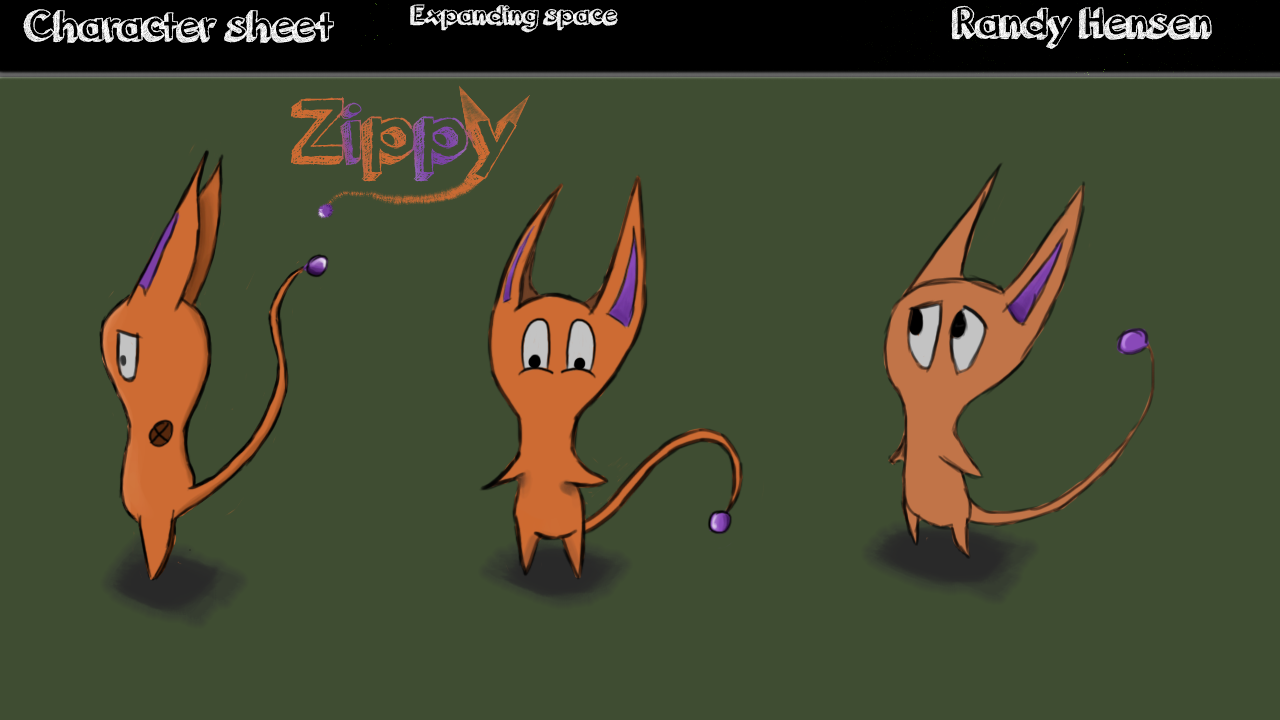
<style>
.page{position:relative;width:1280px;height:720px;background:#3f4d32}
.page>*{position:absolute;margin:0}
.t1{font:28.7px "orangejuice";color:#ffffff}
.t2{font:45.8px "orangejuice";color:#ffffff}
</style>
<div class="page">
<p class="t1" style="left:410px;top:4px;width:208px;height:29px">Expanding space</p>
<p class="t2" style="left:951px;top:5px;width:261px;height:44px">Randy Hensen</p>
<p class="t2" style="left:23px;top:9px;width:311px;height:35px">Character sheet</p>
</div>
